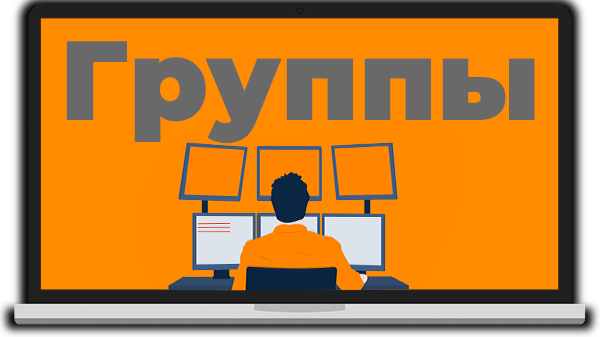
<style>
.page{position:relative;width:600px;height:337px;background:#ff8b00}
.page>*{position:absolute;margin:0}
.t1{font:112.4px "Montserrat-Black";color:#696969}
</style>
<div class="page">
<p class="t1" style="left:66px;top:41px;width:469px;height:102px">Группы</p>
</div>
